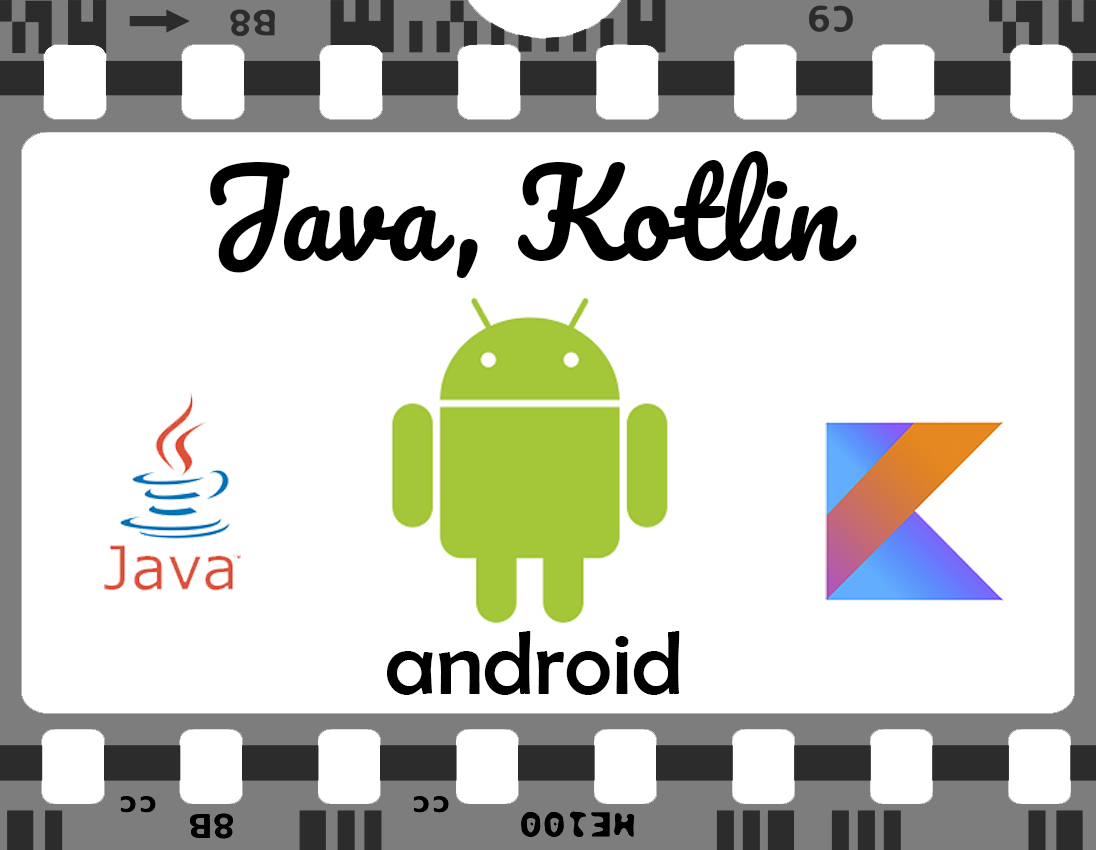
<style>
.page{position:relative;width:1096px;height:850px;background:#ffffff}
.page>*{position:absolute;margin:0}
.t1{font:114.4px "Pacifico-Regular";color:#000000}
.t2{font:91.2px "BerlinSansFB-Reg";color:#000000}
</style>
<div class="page">
<p class="t1" style="left:210px;top:151px;width:647px;height:127px">Java, Kotlin</p>
<p class="t2" style="left:387px;top:631px;width:293px;height:64px">android</p>
</div>
